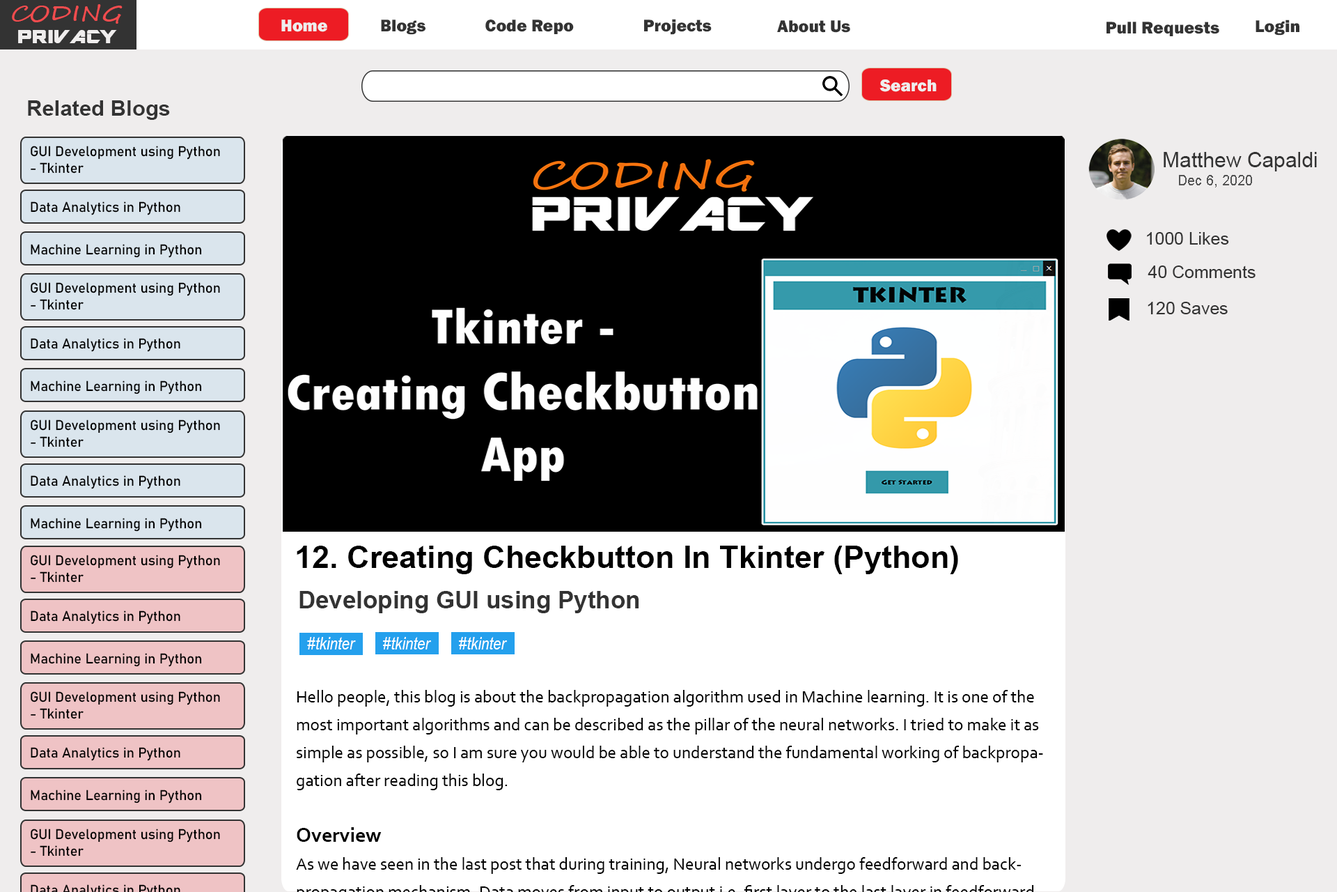
<style>
.page{position:relative;width:1337px;height:892px;background:#ffffff}
.page>*{position:absolute;margin:0}
.t1{font:20.8px "SegoeScript";color:#f24c4e;scale:1.23 1}
.t2{font:20.8px "ARDESTINE";color:#efeded;scale:1.24 1}
.t3{font:17.4px "FranklinGothic-Heavy";color:#eeeeee}
.t4{font:17.4px "FranklinGothic-Heavy";color:#333333}
.t5{font:21.5px "Arial-BoldMT";color:#333333}
.t6{font:14px "Bahnschrift";color:#000000}
.t7{font:20.9px "ArialMT";color:#333333}
.t8{font:13.9px "ArialMT";color:#555555}
.t9{font:17.4px "ArialMT";color:#333333}
.t10{font:31.3px "Arial-BoldMT";color:#000000}
.t11{font:24.4px "Arial-BoldMT";color:#333333}
.t12{font:17.4px "ArialNarrow-Italic";color:#ffffff}
</style>
<div class="page">
<p class="t1" style="left:12px;top:4px;width:111px;height:20px">CODING</p>
<p class="t2" style="left:18px;top:30px;width:99px;height:13px">PRIVACY</p>
<p class="t3" style="left:281px;top:20px;width:46px;height:12px">Home</p>
<p class="t4" style="left:381px;top:20px;width:45px;height:15px">Blogs</p>
<p class="t4" style="left:486px;top:20px;width:88px;height:14px">Code Repo</p>
<p class="t4" style="left:644px;top:19px;width:68px;height:16px">Projects</p>
<p class="t4" style="left:777px;top:20px;width:74px;height:13px">About Us</p>
<p class="t4" style="left:1107px;top:22px;width:113px;height:14px">Pull Requests</p>
<p class="t4" style="left:1256px;top:20px;width:44px;height:16px">Login</p>
<p class="t3" style="left:880px;top:79px;width:57px;height:13px">Search</p>
<p class="t5" style="left:28px;top:100px;width:142px;height:20px">Related Blogs</p>
<p class="t6" style="left:31px;top:146px;width:189px;height:27px">GUI Development using Python <br>- Tkinter</p>
<p class="t7" style="left:1164px;top:152px;width:153px;height:19px">Matthew Capaldi</p>
<p class="t8" style="left:1179px;top:175px;width:73px;height:12px">Dec 6, 2020</p>
<p class="t6" style="left:31px;top:201px;width:149px;height:14px">Data Analytics in Python</p>
<p class="t9" style="left:1147px;top:232px;width:82px;height:12px">1000 Likes</p>
<p class="t6" style="left:31px;top:244px;width:171px;height:14px">Machine Learning in Python</p>
<p class="t9" style="left:1148px;top:265px;width:108px;height:13px">40 Comments</p>
<p class="t6" style="left:31px;top:282px;width:189px;height:28px">GUI Development using Python <br>- Tkinter</p>
<p class="t9" style="left:1148px;top:302px;width:80px;height:12px">120 Saves</p>
<p class="t6" style="left:31px;top:338px;width:149px;height:14px">Data Analytics in Python</p>
<p class="t6" style="left:31px;top:380px;width:171px;height:14px">Machine Learning in Python</p>
<p class="t6" style="left:31px;top:419px;width:189px;height:28px">GUI Development using Python <br>- Tkinter</p>
<p class="t6" style="left:31px;top:475px;width:149px;height:14px">Data Analytics in Python</p>
<p class="t6" style="left:31px;top:518px;width:171px;height:13px">Machine Learning in Python</p>
<p class="t10" style="left:297px;top:545px;width:661px;height:29px">12. Creating Checkbutton In Tkinter (Python)</p>
<p class="t6" style="left:31px;top:554px;width:189px;height:28px">GUI Development using Python <br>- Tkinter</p>
<p class="t11" style="left:300px;top:591px;width:339px;height:22px">Developing GUI using Python</p>
<p class="t6" style="left:31px;top:610px;width:149px;height:14px">Data Analytics in Python</p>
<p class="t12" style="left:307px;top:637px;width:49px;height:12px">#tkinter</p>
<p class="t12" style="left:383px;top:637px;width:48px;height:12px">#tkinter</p>
<p class="t12" style="left:459px;top:637px;width:48px;height:12px">#tkinter</p>
<p class="t6" style="left:31px;top:653px;width:171px;height:14px">Machine Learning in Python</p>
<p class="t6" style="left:31px;top:691px;width:189px;height:28px">GUI Development using Python <br>- Tkinter</p>
<p class="t6" style="left:31px;top:747px;width:149px;height:14px">Data Analytics in Python</p>
<p class="t6" style="left:31px;top:789px;width:171px;height:14px">Machine Learning in Python</p>
<p class="t6" style="left:31px;top:828px;width:189px;height:28px">GUI Development using Python <br>- Tkinter</p>
</div>
